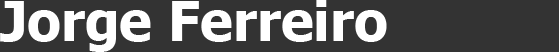
<style>
.page{position:relative;width:559px;height:52px;background:#333333}
.page>*{position:absolute;margin:0}
.t1{font:55px "Tahoma-Bold";color:#ffffff}
</style>
<div class="page">
<p class="t1" style="left:0px;top:0px;width:387px;height:52px">Jorge Ferreiro</p>
</div>
